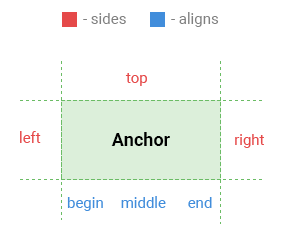
<style>
.page{position:relative;width:282px;height:234px;background:#ffffff}
.page>*{position:absolute;margin:0}
.t1{font:15px "Roboto-Regular";color:#808080}
.t2{font:15px "Roboto-Regular";color:#e54949}
.t3{font:18px "Roboto-Bold";color:#000000}
.t4{font:15px "Roboto-Regular";color:#418ddb}
</style>
<div class="page">
<p class="t1" style="left:83px;top:12px;width:136px;height:15px">- sides            - aligns</p>
<p class="t2" style="left:125px;top:73px;width:22px;height:13px">top</p>
<p class="t2" style="left:20px;top:131px;width:21px;height:12px">left</p>
<p class="t3" style="left:111px;top:132px;width:59px;height:14px">Anchor</p>
<p class="t2" style="left:235px;top:134px;width:29px;height:14px">right</p>
<p class="t4" style="left:67px;top:197px;width:36px;height:14px">begin</p>
<p class="t4" style="left:121px;top:196px;width:45px;height:12px">middle</p>
<p class="t4" style="left:188px;top:197px;width:24px;height:11px">end</p>
</div>
